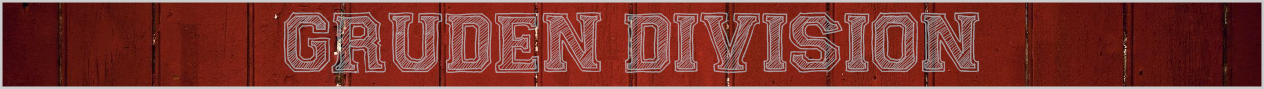
<style>
.page{position:relative;width:1264px;height:89px}
.page>*{position:absolute;margin:0}
.t1{font:84.3px "FineCollege";letter-spacing:-0.01em;color:#b29e9e}
</style>
<div class="page">
<p class="t1" style="left:283px;top:11px;width:697px;height:63px">GRUDEN DIVISION</p>
<p class="t1" style="left:283px;top:11px;width:697px;height:63px">GRUDEN DIVISION</p>
<p class="t1" style="left:283px;top:11px;width:697px;height:63px">GRUDEN DIVISION</p>
</div>
